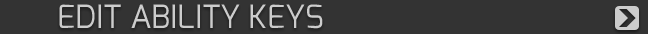
<style>
.page{position:relative;width:648px;height:34px;background:#333333}
.page>*{position:absolute;margin:0}
.t1{font:32px "Exo-Regular";color:#cccccc;text-transform:uppercase}
</style>
<div class="page">
<p class="t1" style="left:59px;top:4px;width:264px;height:25px">Edit Ability keys</p>
</div>
